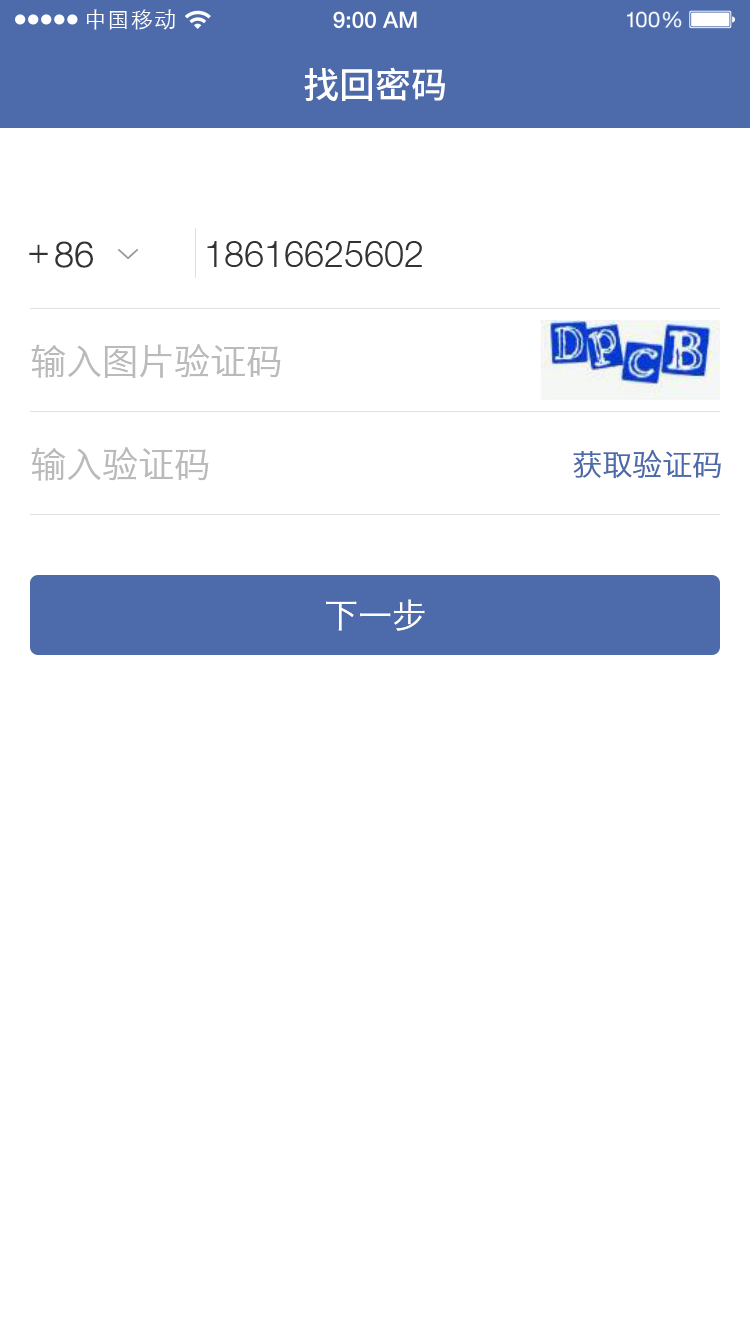
<style>
.page{position:relative;width:750px;height:1334px;background:#ffffff}
.page>*{position:absolute;margin:0}
.t1{font:21.9px "STXihei";letter-spacing:0.04em;color:#ffffff}
.t2{font:36px "NotoSansHans-Medium";color:#ffffff}
.t3{font:36px "HelveticaNeueLTStd-Lt";color:#333333}
.t4{font:36px "HiraginoSansGB-W3";color:#bababa}
.t5{font:30px "HiraginoSansGB-W3";color:#4d6bab}
.t6{font:34px "HiraginoSansGB-W3";color:#ffffff}
</style>
<div class="page">
<p class="t1" style="left:86px;top:9px;width:89px;height:21px">中国移动</p>
<p class="t2" style="left:304px;top:67px;width:141px;height:34px">找回密码</p>
<p class="t3" style="left:29px;top:244px;width:19px;height:19px">+</p>
<p class="t3" style="left:55px;top:241px;width:38px;height:27px">86</p>
<p class="t3" style="left:207px;top:241px;width:215px;height:26px">18616625602</p>
<p class="t4" style="left:31px;top:344px;width:250px;height:34px">输入图片验证码</p>
<p class="t4" style="left:31px;top:447px;width:178px;height:34px">输入验证码</p>
<p class="t5" style="left:573px;top:449px;width:148px;height:30px">获取验证码</p>
<p class="t6" style="left:326px;top:599px;width:99px;height:32px">下一步</p>
</div>
